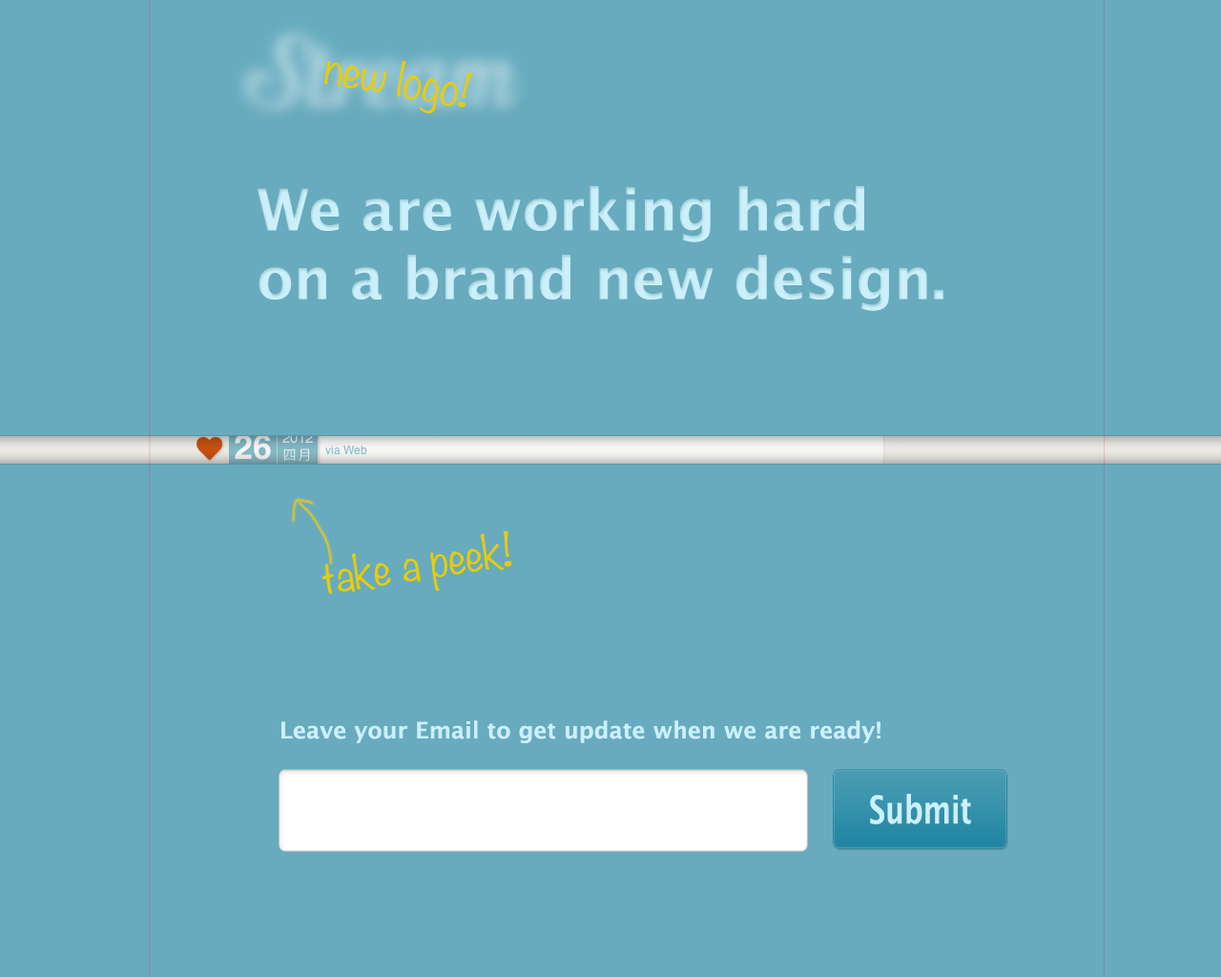
<style>
.page{position:relative;width:1221px;height:977px;background:#68abbe}
.page>*{position:absolute;margin:0}
.t1{font:41.2px "Noteworthy-Light";color:#e9cc08}
.t2{font:57.2px "LucidaGrande-Bold";color:#cbf0fa}
.t3{font:22.9px "LucidaGrande-Bold";color:#cbf0fa}
.t4{font:38.2px "LucidaGrande-Bold";color:#cbf0fa;scale:0.75 1}
</style>
<div class="page">
<p class="t1" style="left:324px;top:60px;width:148px;height:54px;rotate:10deg">new logo!</p>
<p class="t2" style="left:257px;top:186px;width:686px;height:125px">We are working hard on a brand new design.</p>
<p class="t1" style="left:321px;top:530px;width:191px;height:64px;rotate:-9deg">take a peek!</p>
<p class="t3" style="left:281px;top:720px;width:599px;height:23px">Leave your Email to get update when we are ready!</p>
<p class="t4" style="left:870px;top:794px;width:101px;height:30px">Submit</p>
</div>
